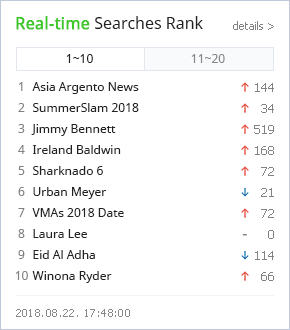
<style>
.page{position:relative;width:290px;height:330px;background:#ffffff}
.page>*{position:absolute;margin:0}
.t1{font:16px "NotoSans";color:#222222}
.t2{font:16px "NotoSans";color:#3ec729;font-weight:bold}
.t3{font:11px "Tahoma";color:#838383}
.t4{font:12px "NotoSans";color:#222222}
.t5{font:12px "NotoSans";color:#888888}
.t6{font:12px/21px "NotoSans";color:#828282}
.t7{font:12px/21px "NotoSans";color:#222222}
.t8{font:12px/21px "Tahoma";color:#828282}
.t9{font:16px "NotoSans";color:#828282}
.t10{font:11px "Tahoma";letter-spacing:0.04em;color:#888888}
</style>
<div class="page">
<p class="t1" style="left:16px;top:16px;width:187px;height:14px"><span class="t2">Real-time</span> Searches Rank</p>
<p class="t3" style="left:233px;top:21px;width:41px;height:9px">details &gt;</p>
<p class="t4" style="left:66px;top:54px;width:27px;height:9px">1~10</p>
<p class="t5" style="left:191px;top:54px;width:34px;height:9px">11~20</p>
<p class="t6" style="left:15px;top:82px;width:13px;height:198px;text-align:center">1<br>2<br>3<br>4<br>5<br>6<br>7<br>8<br>9<br>10</p>
<p class="t7" style="left:31px;top:82px;width:108px;height:201px">Asia Argento News<br>SummerSlam 2018<br>Jimmy Bennett<br>Ireland Baldwin<br>Sharknado 6<br>Urban Meyer<br>VMAs 2018 Date<br>Laura Lee<br>Eid Al Adha<br>Winona Ryder</p>
<p class="t8" style="left:254px;top:83px;width:20px;height:198px;text-align:right">144<br>34<br>519<br>168<br>72<br>21<br>72<br>0<br>114<br>66</p>
<p class="t9" style="left:242px;top:234px;width:5px;height:2px">-</p>
<p class="t10" style="left:16px;top:309px;width:114px;height:8px">2018.08.22. 17:48:00</p>
</div>
